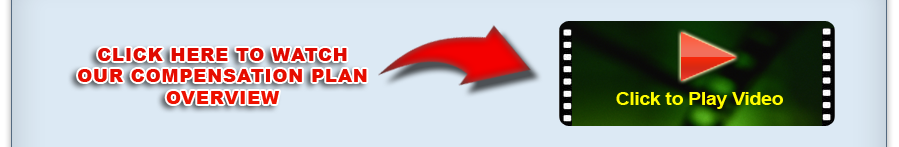
<style>
.page{position:relative;width:899px;height:147px;background:#dce9f4}
.page>*{position:absolute;margin:0}
.t1{font:18px "Arial-Black";letter-spacing:0.05em;color:#e50d00}
.t2{font:18px "Arial-BoldMT";letter-spacing:-0.025em;color:#fffc00;scale:1.1 1}
</style>
<div class="page">
<p class="t1" style="left:78px;top:48px;width:289px;height:56px;text-align:center">CLICK HERE TO WATCH <br>OUR COMPENSATION PLAN <br>OVERVIEW</p>
<p class="t2" style="left:616px;top:92px;width:167px;height:17px">Click to Play Video</p>
</div>
